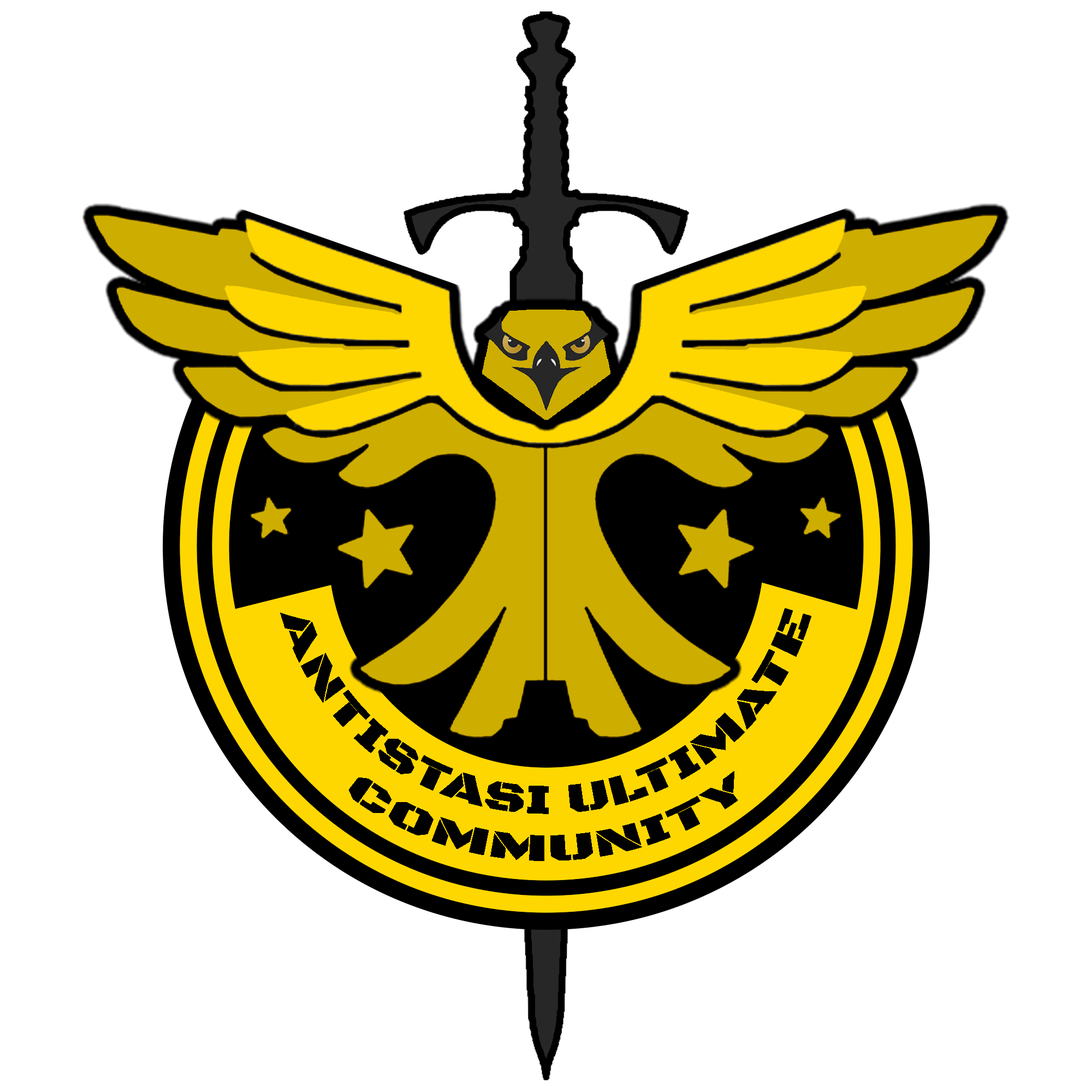
<style>
.page{position:relative;width:1092px;height:1092px;background:#ffffff}
.page>*{position:absolute;margin:0}
.t1{font:42px "BlackOpsOne-Regular";color:#010101}
.t2{font:39.3px "BlackOpsOne-Regular";color:#010101}
</style>
<div class="page">
<p class="t1" style="left:280px;top:608px;width:531px;height:253px;text-align:center">ANTISTASI ULTIMATE<br><span class="t2">COMMUNITY</span></p>
</div>
